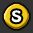
<style>
.page{position:relative;width:33px;height:33px;background:#333333}
.page>*{position:absolute;margin:0}
.t1{font:13.5px "M";color:#ffffff;scale:1.2 1}
</style>
<div class="page">
<p class="t1" style="left:11px;top:10px;width:11px;height:13px">S</p>
</div>
